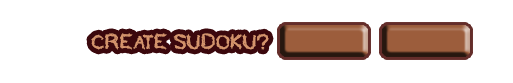
<style>
.page{position:relative;width:513px;height:83px;background:#ffffff}
.page>*{position:absolute;margin:0}
.t1{font:20px "TOBACCO";color:#c4845a;font-weight:bold}
</style>
<div class="page">
<p class="t1" style="left:91px;top:33px;width:178px;height:17px">CREATE SUDOKU?</p>
</div>
